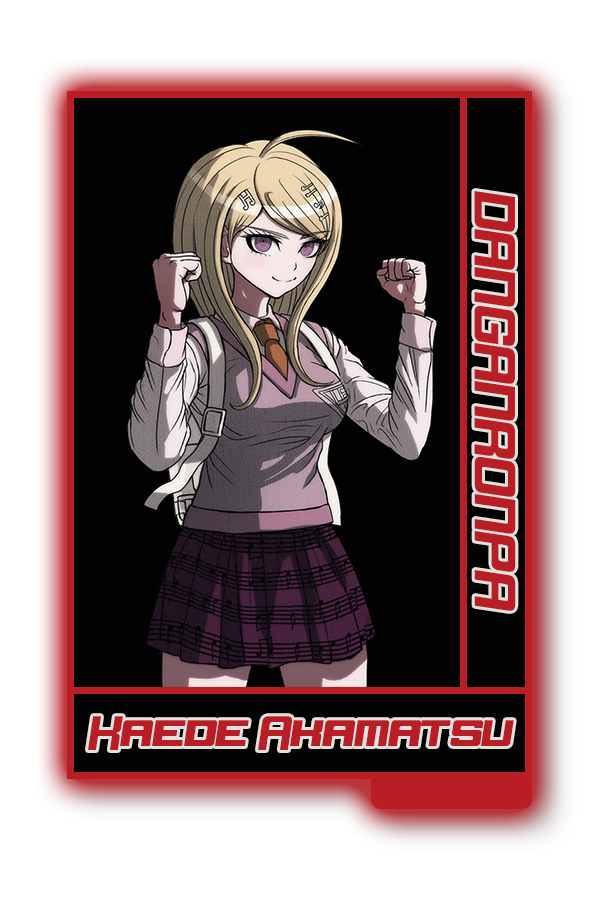
<style>
.page{position:relative;width:600px;height:900px;background:#020202}
.page>*{position:absolute;margin:0}
.t1{font:48.8px "DorBlue";color:#bb2c2e}
.t2{font:40.6px "DorBlue";color:#bb2c2e}
</style>
<div class="page">
<p class="t1" style="left:474px;top:191px;width:42px;height:420px;rotate:90deg">DANGANRONPA</p>
<p class="t2" style="left:88px;top:716px;width:426px;height:34px">Kaede Akamatsu</p>
</div>
